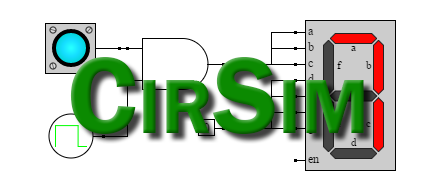
<style>
.page{position:relative;width:436px;height:191px;background:#ffffff}
.page>*{position:absolute;margin:0}
.t1{font:112.9px "FranklinGothic-Demi";color:#0b8a01;font-variant:small-caps}
</style>
<div class="page">
<p class="t1" style="left:70px;top:57px;width:294px;height:77px">CirSim</p>
</div>
